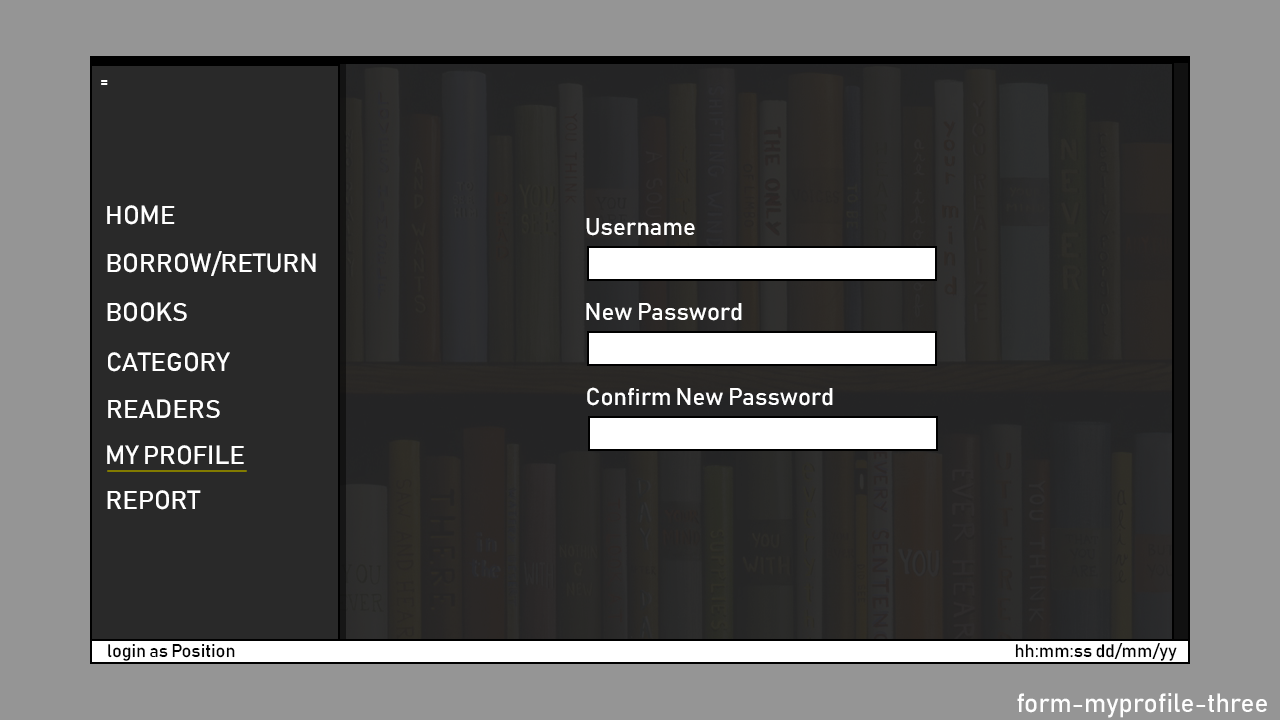
<style>
.page{position:relative;width:1280px;height:720px;background:#959595}
.page>*{position:absolute;margin:0}
.t1{font:18px "Bahnschrift";color:#ffffff}
.t2{font:26px "Bahnschrift";color:#ffffff}
.t3{font:24px "Bahnschrift";color:#ffffff}
.t4{font:18px "Bahnschrift";color:#000000}
.t5{font:26px "Bahnschrift";color:#fefefe}
</style>
<div class="page">
<p class="t1" style="left:101px;top:80px;width:7px;height:5px">=</p>
<p class="t2" style="left:107px;top:205px;width:68px;height:20px">HOME</p>
<p class="t3" style="left:586px;top:218px;width:109px;height:18px">Username</p>
<p class="t2" style="left:107px;top:251px;width:209px;height:25px">BORROW/RETURN</p>
<p class="t2" style="left:107px;top:302px;width:80px;height:20px">BOOKS</p>
<p class="t3" style="left:586px;top:303px;width:156px;height:18px">New Password</p>
<p class="t2" style="left:108px;top:352px;width:122px;height:20px">CATEGORY</p>
<p class="t3" style="left:587px;top:387px;width:246px;height:19px">Confirm New Password</p>
<p class="t2" style="left:108px;top:399px;width:112px;height:19px">READERS</p>
<p class="t2" style="left:107px;top:445px;width:137px;height:20px">MY PROFILE</p>
<p class="t2" style="left:107px;top:490px;width:94px;height:20px">REPORT</p>
<p class="t4" style="left:108px;top:644px;width:127px;height:17px">login as Position</p>
<p class="t4" style="left:1015px;top:643px;width:162px;height:18px">hh:mm:ss dd/mm/yy</p>
<p class="t5" style="left:1017px;top:693px;width:250px;height:25px">form-myprofile-three</p>
</div>
